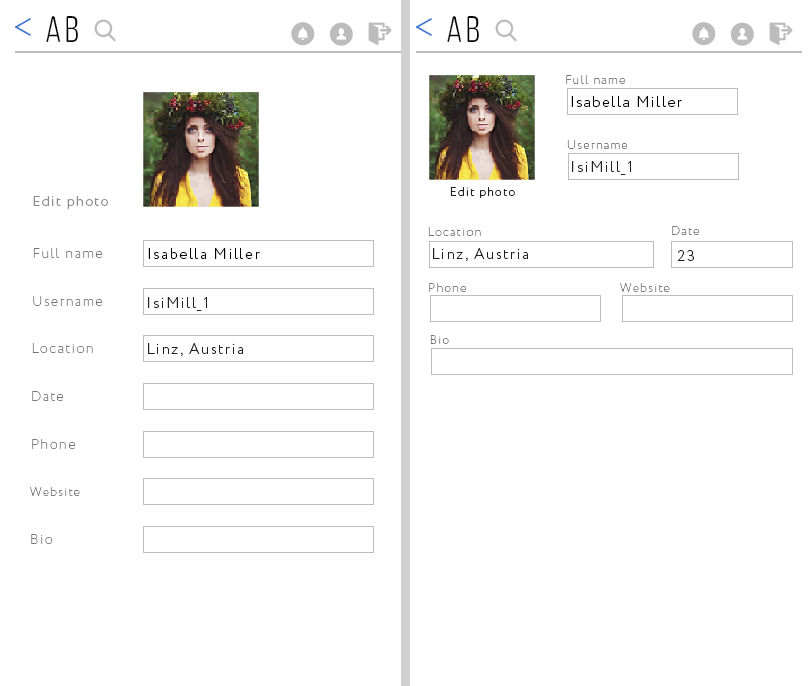
<style>
.page{position:relative;width:811px;height:686px;background:#ffffff}
.page>*{position:absolute;margin:0}
.t1{font:37px "ClutchSans-Regular";letter-spacing:0.1em;color:#000000}
.t2{font:12.2px "Circe-ExtraLight";letter-spacing:0.1em;color:#747474}
.t3{font:15.2px "Circe-Light";letter-spacing:0.1em;color:#000000}
.t4{font:12px "Circe-ExtraLight";letter-spacing:0.1em;color:#747474}
.t5{font:15px "Circe-Light";letter-spacing:0.1em;color:#202020}
.t6{font:14px "Circe-Light";letter-spacing:0.1em;color:#8b8a8a}
.t7{font:12px "Circe-Light";letter-spacing:0.1em;color:#202020}
.t8{font:14px "Circe-ExtraLight";letter-spacing:0.1em;color:#747474}
.t9{font:15px "Circe-Light";letter-spacing:0.1em;color:#000000}
</style>
<div class="page">
<p class="t1" style="left:46px;top:16px;width:32px;height:26px">Ab</p>
<p class="t1" style="left:447px;top:16px;width:32px;height:26px">Ab</p>
<p class="t2" style="left:566px;top:75px;width:60px;height:9px">Full name</p>
<p class="t3" style="left:571px;top:96px;width:111px;height:11px">Isabella Miller</p>
<p class="t4" style="left:567px;top:140px;width:61px;height:9px">Username</p>
<p class="t5" style="left:572px;top:161px;width:59px;height:14px">IsiMill_1</p>
<p class="t6" style="left:33px;top:196px;width:75px;height:13px">Edit photo</p>
<p class="t7" style="left:450px;top:187px;width:65px;height:11px">Edit photo</p>
<p class="t4" style="left:428px;top:227px;width:53px;height:9px">Location</p>
<p class="t4" style="left:672px;top:226px;width:28px;height:9px">Date</p>
<p class="t8" style="left:33px;top:248px;width:70px;height:10px">Full name</p>
<p class="t9" style="left:148px;top:248px;width:112px;height:11px">Isabella Miller</p>
<p class="t5" style="left:433px;top:248px;width:95px;height:13px">Linz, Austria</p>
<p class="t5" style="left:677px;top:250px;width:17px;height:11px">23</p>
<p class="t4" style="left:429px;top:283px;width:38px;height:9px">Phone</p>
<p class="t4" style="left:620px;top:283px;width:50px;height:9px">Website</p>
<p class="t8" style="left:33px;top:296px;width:70px;height:10px">Username</p>
<p class="t5" style="left:148px;top:297px;width:59px;height:14px">IsiMill_1</p>
<p class="t4" style="left:430px;top:335px;width:19px;height:9px">Bio</p>
<p class="t8" style="left:32px;top:343px;width:61px;height:10px">Location</p>
<p class="t5" style="left:148px;top:343px;width:95px;height:13px">Linz, Austria</p>
<p class="t8" style="left:32px;top:391px;width:32px;height:10px">Date</p>
<p class="t8" style="left:32px;top:439px;width:44px;height:10px">Phone</p>
<p class="t4" style="left:30px;top:487px;width:50px;height:9px">Website</p>
<p class="t8" style="left:31px;top:534px;width:22px;height:10px">Bio</p>
</div>
